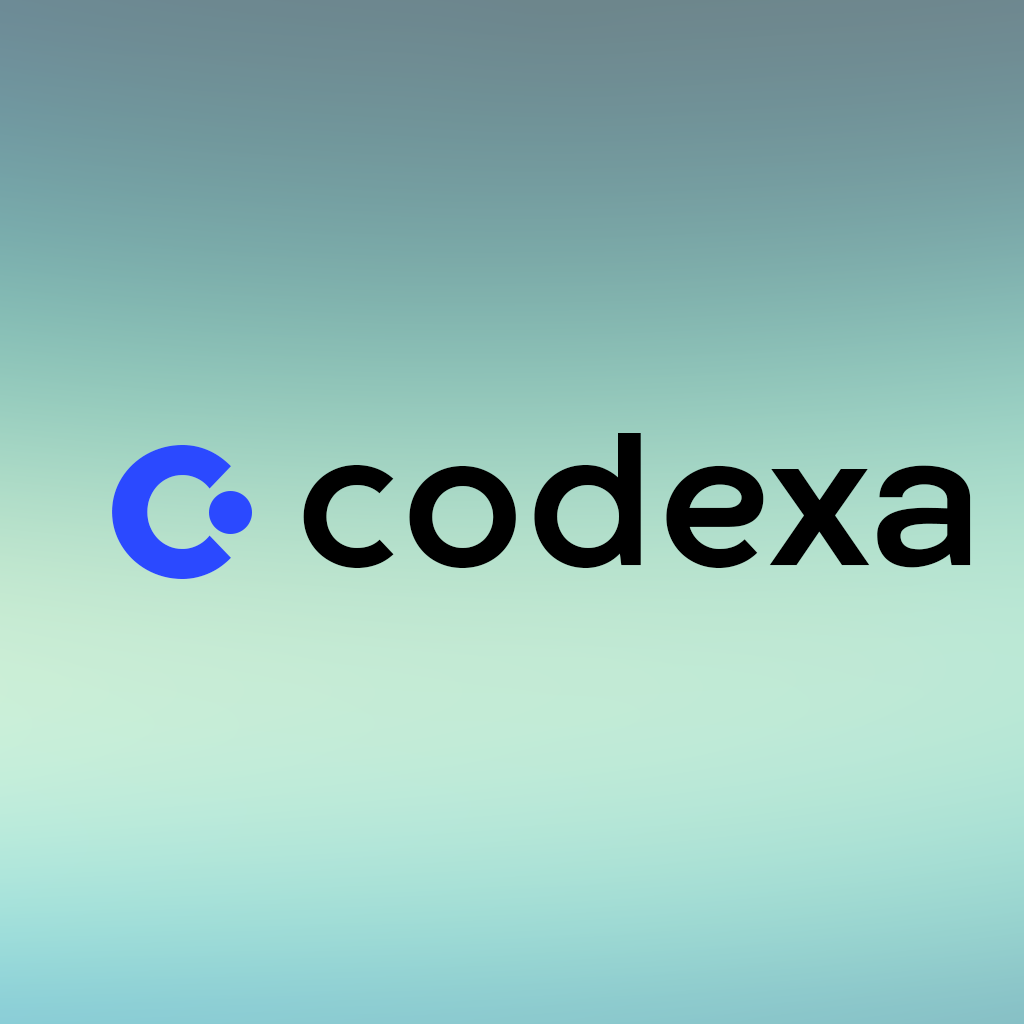
<style>
.page{position:relative;width:1024px;height:1024px}
.page>*{position:absolute;margin:0}
.t1{font:192px "CodecWarmTrial-Bold";color:#000000}
.t2{font:192px "CodecWarmTrial-Heavy";color:#2b49ff}
</style>
<div class="page">
<p class="t1" style="left:303px;top:433px;width:668px;height:135px">codexa</p>
<p class="t2" style="left:112px;top:445px;width:119px;height:134px">C</p>
</div>
